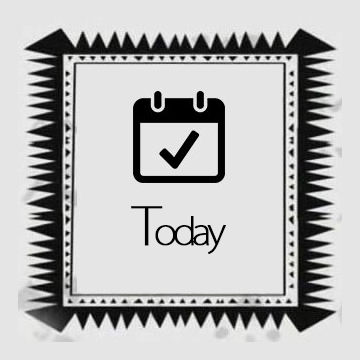
<style>
.page{position:relative;width:360px;height:360px;background:#e5e5e5}
.page>*{position:absolute;margin:0}
.t1{font:36px "KozGoPro-ExtraLight";letter-spacing:-0.12em;color:#010101;font-weight:bold;scale:1.05 1}
.t2{font:52px "KozGoPro-ExtraLight";letter-spacing:-0.12em;color:#010101;font-weight:bold;scale:1.05 1}
</style>
<div class="page">
<p class="t1" style="left:131px;top:206px;width:95px;height:48px"><span class="t2">T</span>oday</p>
</div>
